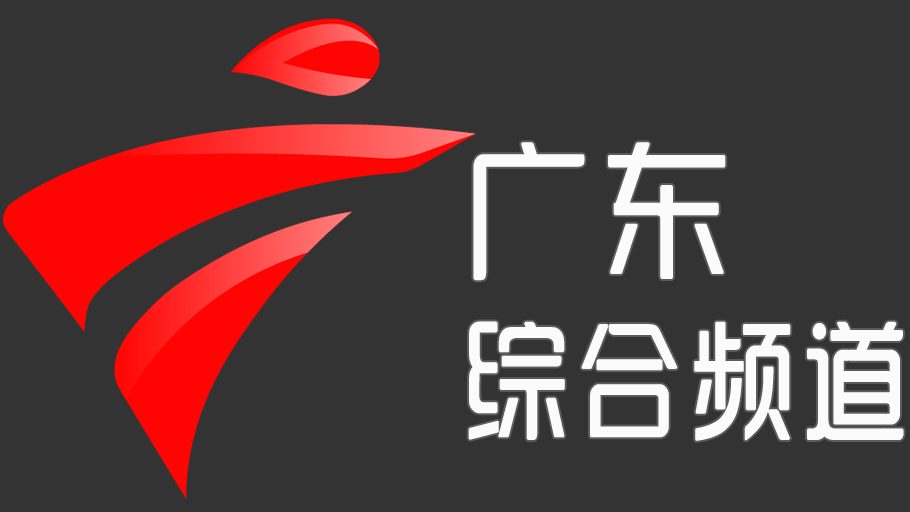
<style>
.page{position:relative;width:910px;height:512px;background:#333333}
.page>*{position:absolute;margin:0}
.t1{font:130px/180px "SJyunlvyuan";letter-spacing:0.02em;color:#fcfbfb;scale:0.85 1}
.t2{font:150px/180px "SJyunlvyuan";letter-spacing:0.02em;color:#fcfbfb;scale:0.9 1}
</style>
<div class="page">
<p class="t1" style="left:468px;top:142px;width:436px;height:299px"><span class="t2">广东<br></span>综合频道</p>
</div>
